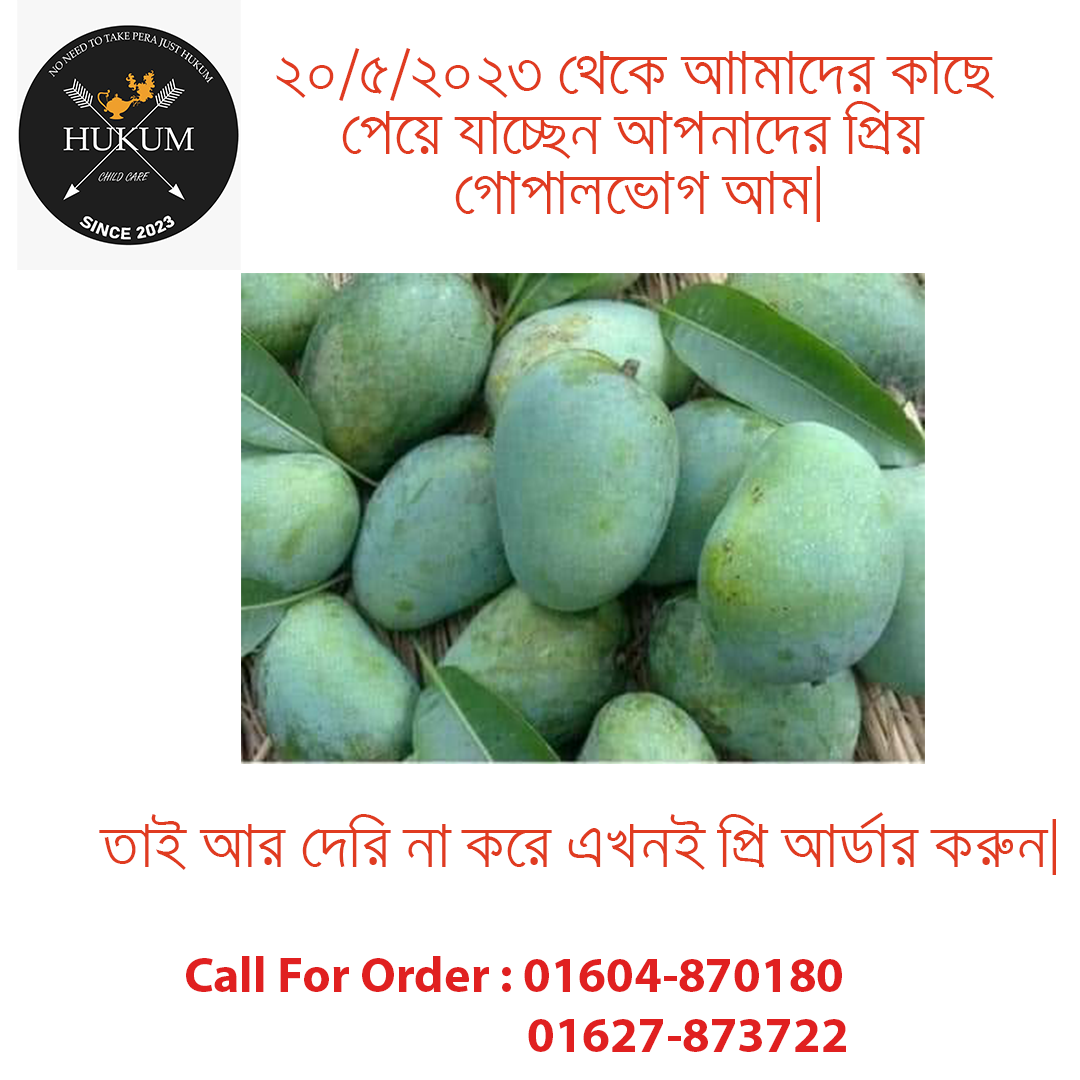
<style>
.page{position:relative;width:1080px;height:1080px;background:#ffffff}
.page>*{position:absolute;margin:0}
.t1{font:50px "SiyamRupaliANSI";color:#e03b20}
.t2{font:50px "MyriadPro-Bold";color:#e02020}
</style>
<div class="page">
<p class="t1" style="left:276px;top:48px;width:719px;height:174px;text-align:center">20/5/2023 †_‡K Avvgv‡`i Kv‡Q <br>†c‡q hv‡”Qb Avcbv‡`i wcÖq <br>†Mvcvj‡fvM Avg|</p>
<p class="t1" style="left:99px;top:812px;width:957px;height:63px">ZvB Avi †`wi bv K‡i GLbB wcÖ AvW©vi Ki“b|</p>
<p class="t2" style="left:186px;top:956px;width:660px;height:96px">Call For Order : 01604-870180 <br>                                                 01627-873722</p>
</div>
